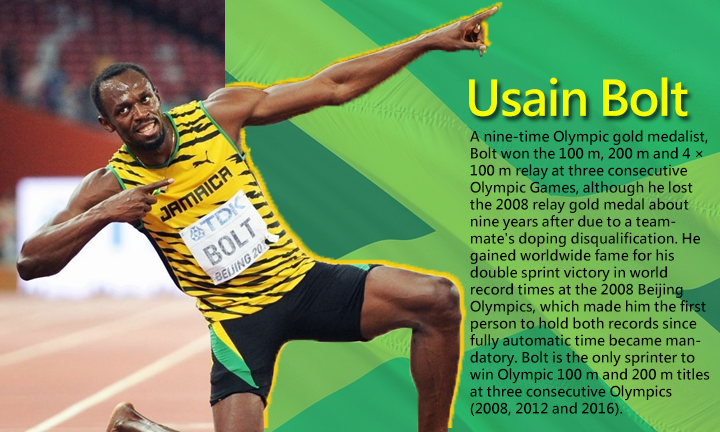
<style>
.page{position:relative;width:720px;height:432px}
.page>*{position:absolute;margin:0}
.t1{font:48px "MicrosoftJhengHeiBold";letter-spacing:-0.025em;color:#f6ff00}
.t2{font:14px/17px "MicrosoftJhengHeiBold";color:#010101}
</style>
<div class="page">
<p class="t1" style="left:469px;top:77px;width:219px;height:40px">Usain Bolt</p>
<p class="t2" style="left:470px;top:130px;width:240px;height:286px">A nine-time Olympic gold medalist, Bolt won the 100 m, 200 m and 4 × 100 m relay at three consecutive Olympic Games, although he lost the 2008 relay gold medal about nine years after due to a teammate's doping disqualification. He gained worldwide fame for his double sprint victory in world record times at the 2008 Beijing Olympics, which made him the first person to hold both records since fully automatic time became mandatory. Bolt is the only sprinter to win Olympic 100 m and 200 m titles at three consecutive Olympics (2008, 2012 and 2016).</p>
</div>
